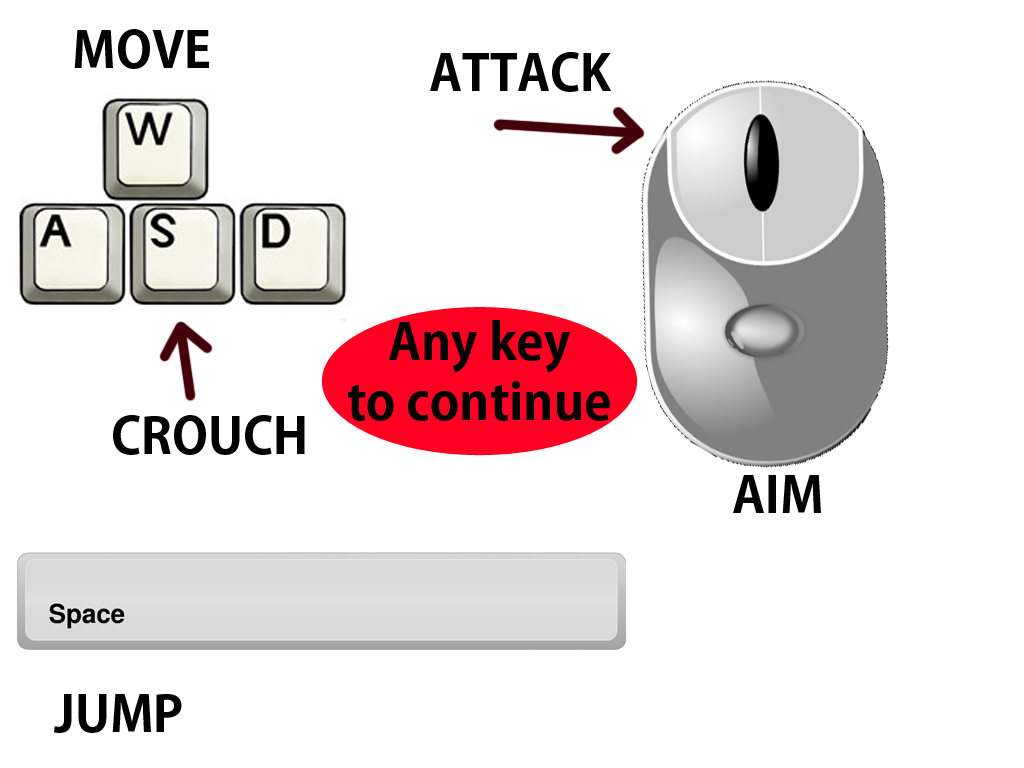
<style>
.page{position:relative;width:1024px;height:768px;background:#ffffff}
.page>*{position:absolute;margin:0}
.t1{font:50px "AdobeGothicStd-Bold";color:#000000}
</style>
<div class="page">
<p class="t1" style="left:74px;top:29px;width:135px;height:40px">MOVE</p>
<p class="t1" style="left:430px;top:52px;width:182px;height:40px">ATTACK</p>
<p class="t1" style="left:348px;top:320px;width:262px;height:101px;text-align:center">Any key<br>to continue</p>
<p class="t1" style="left:733px;top:475px;width:88px;height:38px">AIM</p>
<p class="t1" style="left:54px;top:694px;width:128px;height:39px">JUMP</p>
</div>
